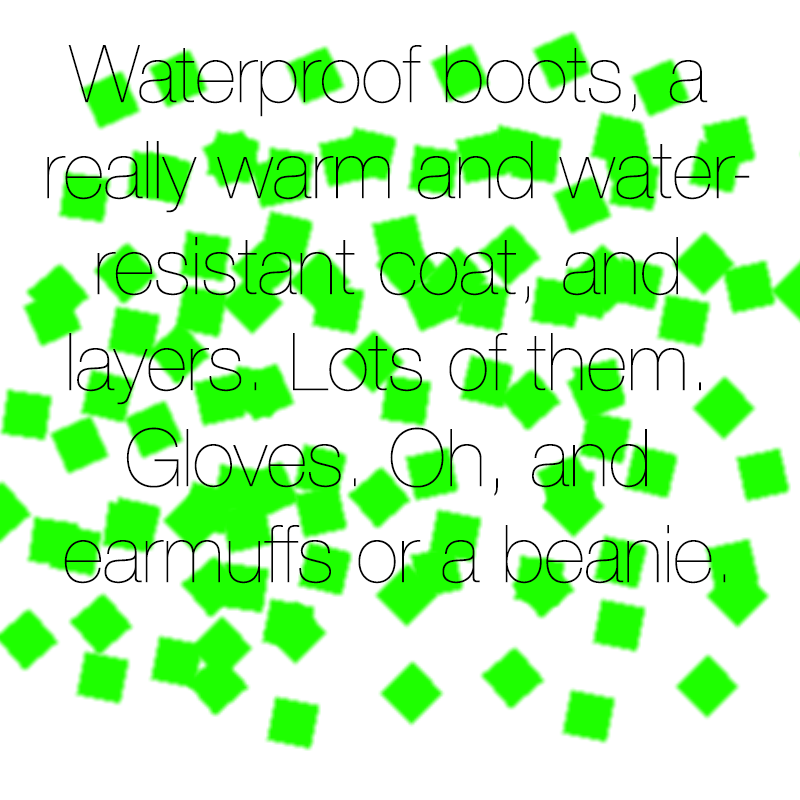
<style>
.page{position:relative;width:800px;height:800px;background:#ffffff}
.page>*{position:absolute;margin:0}
.t1{font:80px "HelveticaNeue-UltraLight";color:#000000}
</style>
<div class="page">
<p class="t1" style="left:47px;top:45px;width:703px;height:539px;text-align:center">Waterproof boots, a <br>really warm and water-<br>resistant coat, and <br>layers. Lots of them. <br>Gloves. Oh, and <br>earmuffs or a beanie.</p>
</div>
